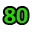
<style>
.page{position:relative;width:32px;height:32px;background:#ffffff}
.page>*{position:absolute;margin:0}
.t1{font:24px "Calibri-Bold";color:#2dd500}
</style>
<div class="page">
<p class="t1" style="left:4px;top:8px;width:24px;height:15px">80</p>
</div>
